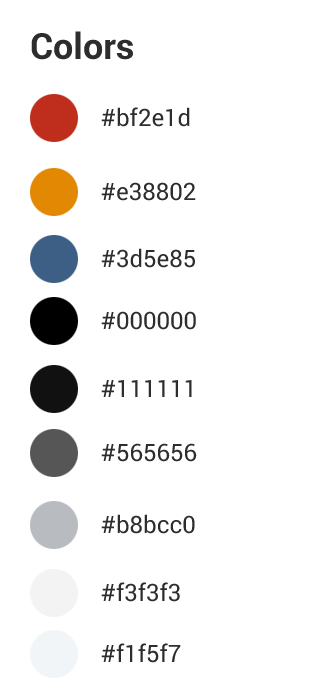
<style>
.page{position:relative;width:315px;height:700px;background:#ffffff}
.page>*{position:absolute;margin:0}
.t1{font:36px "Roboto-Bold";color:#2d2d2d}
.t2{font:24px "Roboto-Regular";color:#2d2d2d}
</style>
<div class="page">
<p class="t1" style="left:31px;top:31px;width:102px;height:29px">Colors</p>
<p class="t2" style="left:101px;top:107px;width:89px;height:20px">#bf2e1d</p>
<p class="t2" style="left:101px;top:182px;width:95px;height:19px">#e38802</p>
<p class="t2" style="left:101px;top:248px;width:94px;height:20px">#3d5e85</p>
<p class="t2" style="left:101px;top:311px;width:95px;height:19px">#000000</p>
<p class="t2" style="left:101px;top:380px;width:91px;height:17px">#111111</p>
<p class="t2" style="left:101px;top:443px;width:96px;height:19px">#565656</p>
<p class="t2" style="left:101px;top:514px;width:94px;height:20px">#b8bcc0</p>
<p class="t2" style="left:101px;top:582px;width:79px;height:20px">#f3f3f3</p>
<p class="t2" style="left:101px;top:643px;width:80px;height:20px">#f1f5f7</p>
</div>
